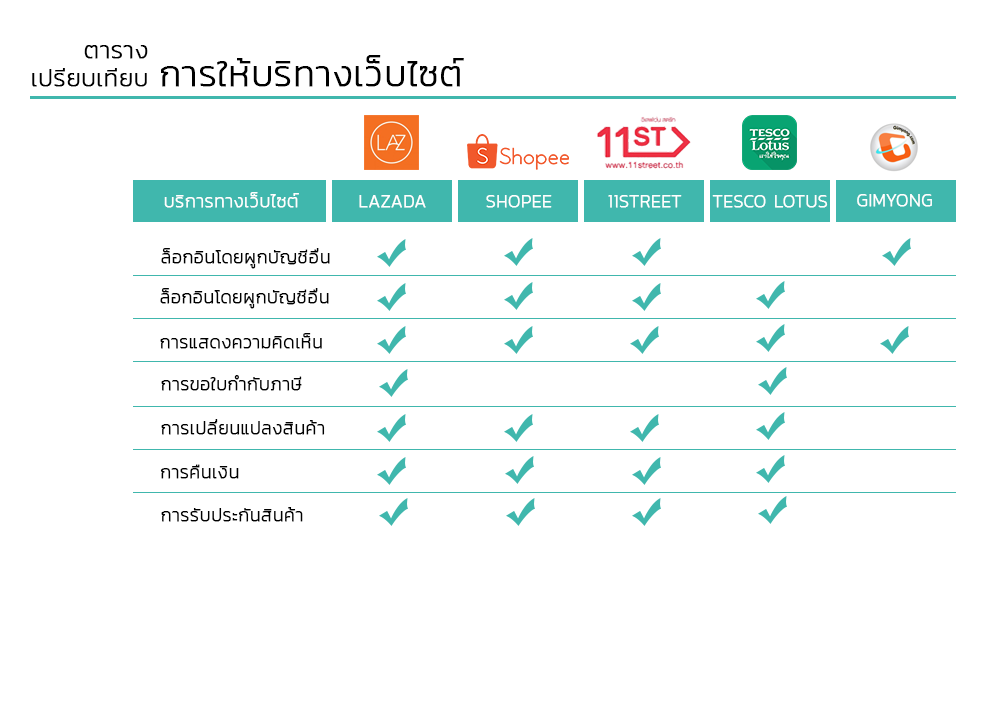
<style>
.page{position:relative;width:1000px;height:726px;background:#ffffff}
.page>*{position:absolute;margin:0}
.t1{font:36px/28px "Kanit-ExtraLight";color:#000000;font-weight:bold}
.t2{font:24px/28px "Kanit-ExtraLight";color:#000000;font-weight:bold}
.t3{font:18px "Kanit-ExtraLight";color:#ffffff;font-weight:bold}
.t4{font:18px "Kanit-ExtraLight";color:#000000;font-weight:bold}
</style>
<div class="page">
<p class="t1" style="left:32px;top:45px;width:432px;height:42px"><span class="t2">     ตาราง<br>เปรียบเทียบ </span>การให้บริทางเว็บไซต์</p>
<p class="t3" style="left:164px;top:192px;width:135px;height:16px">บริการทางเว็บไซต์</p>
<p class="t3" style="left:359px;top:195px;width:67px;height:13px">LAZADA</p>
<p class="t3" style="left:486px;top:195px;width:66px;height:13px">SHOPEE</p>
<p class="t3" style="left:608px;top:195px;width:74px;height:13px">11STREET</p>
<p class="t3" style="left:712px;top:195px;width:116px;height:13px">TESCO LOTUS</p>
<p class="t3" style="left:857px;top:194px;width:75px;height:13px">GIMYONG</p>
<p class="t4" style="left:161px;top:248px;width:169px;height:21px">ล็อกอินโดยผูกบัญชีอื่น</p>
<p class="t4" style="left:160px;top:288px;width:169px;height:21px">ล็อกอินโดยผูกบัญชีอื่น</p>
<p class="t4" style="left:160px;top:333px;width:162px;height:16px">การแสดงความคิดเห็น</p>
<p class="t4" style="left:161px;top:375px;width:141px;height:16px">การขอใบกำกับภาษี</p>
<p class="t4" style="left:161px;top:419px;width:164px;height:16px">การเปลี่ยนแปลงสินค้า</p>
<p class="t4" style="left:160px;top:464px;width:79px;height:15px">การคืนเงิน</p>
<p class="t4" style="left:161px;top:507px;width:142px;height:15px">การรับประกันสินค้า</p>
</div>
